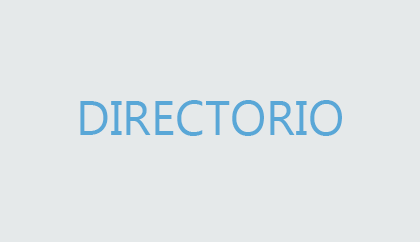
<style>
.page{position:relative;width:420px;height:242px;background:#e5e9ea}
.page>*{position:absolute;margin:0}
.t1{font:48px "Ebrima";color:#59a7d7}
</style>
<div class="page">
<p class="t1" style="left:80px;top:100px;width:262px;height:36px">DIRECTORIO</p>
</div>
